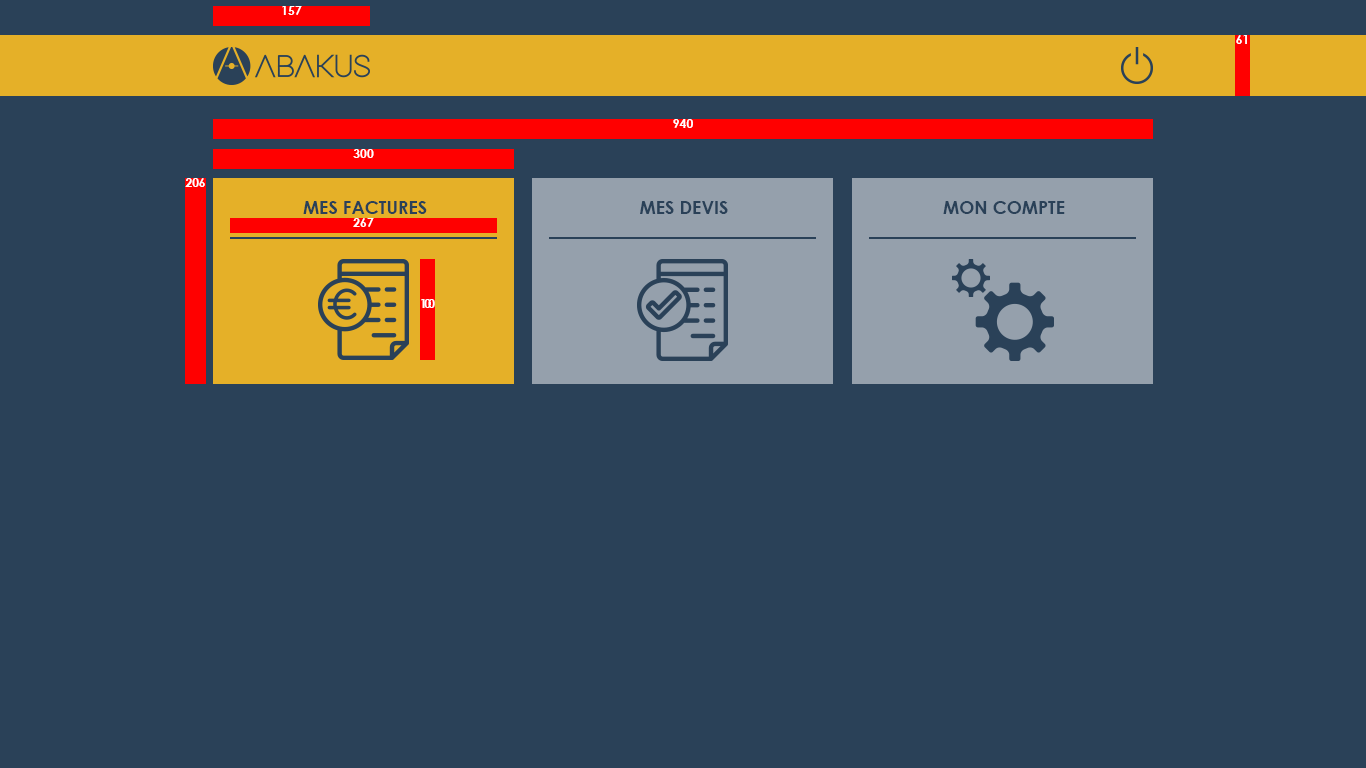
<style>
.page{position:relative;width:1366px;height:768px;background:#2a4158}
.page>*{position:absolute;margin:0}
.t1{font:12.2px "CenturyGothic-Bold";color:#ffffff;text-transform:uppercase}
.t2{font:12px "CenturyGothic-Bold";color:#ffffff;text-transform:uppercase}
.t3{font:18px "CenturyGothic-Bold";color:#2a4158;text-transform:uppercase}
.t4{font:12px "CenturyGothic-Bold";letter-spacing:-0.22em;color:#ffffff;text-transform:uppercase}
</style>
<div class="page">
<p class="t1" style="left:282px;top:6px;width:20px;height:9px">157</p>
<p class="t2" style="left:1236px;top:35px;width:11px;height:9px">61</p>
<p class="t1" style="left:673px;top:119px;width:20px;height:9px">940</p>
<p class="t1" style="left:353px;top:149px;width:21px;height:9px">300</p>
<p class="t2" style="left:185px;top:178px;width:20px;height:9px">206</p>
<p class="t3" style="left:303px;top:201px;width:124px;height:13px">Mes factures</p>
<p class="t3" style="left:640px;top:201px;width:88px;height:13px">Mes devis</p>
<p class="t3" style="left:943px;top:201px;width:122px;height:13px">mon compte</p>
<p class="t1" style="left:353px;top:218px;width:21px;height:9px">267</p>
<p class="t4" style="left:421px;top:299px;width:14px;height:9px">100</p>
</div>
